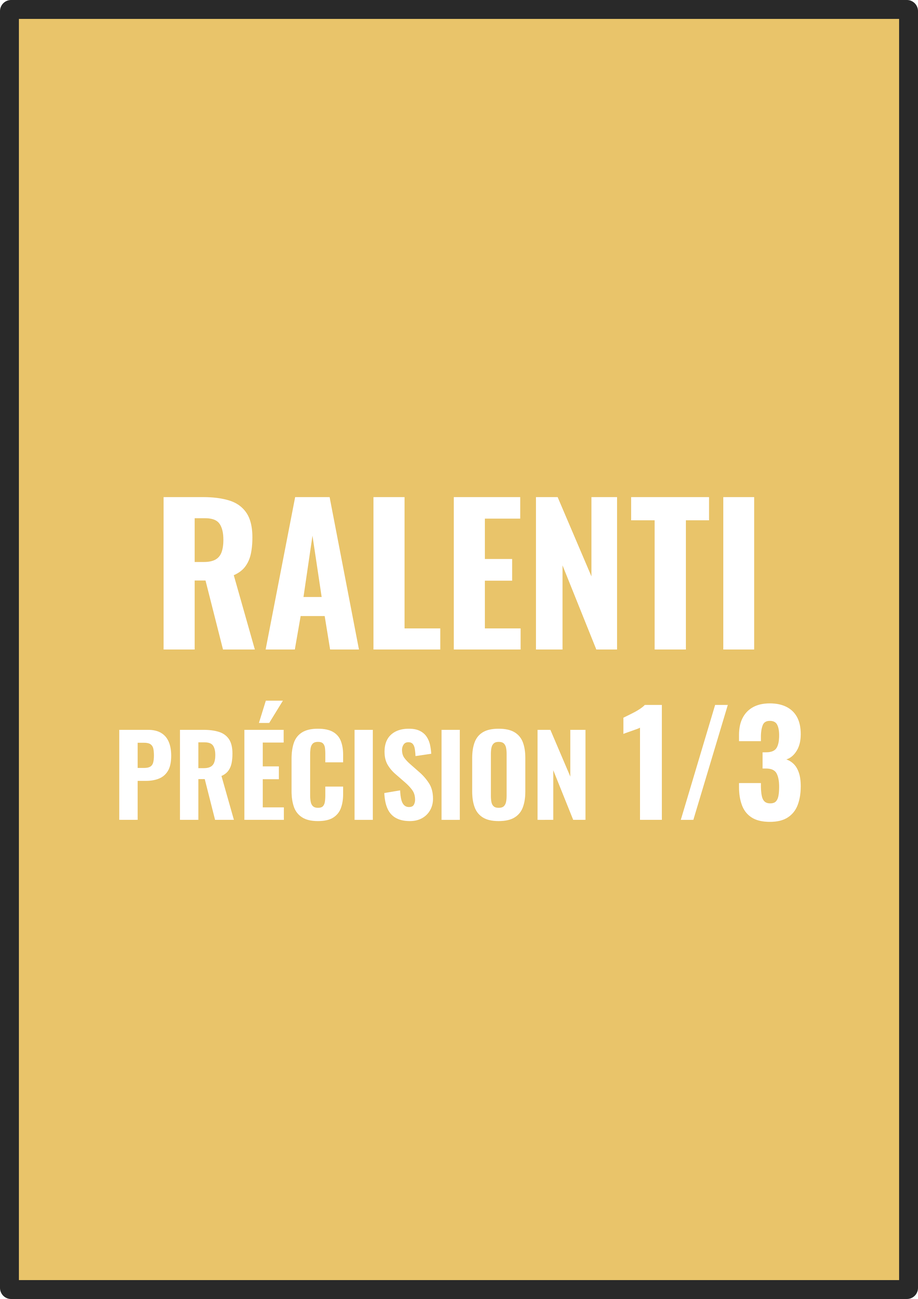
<style>
.page{position:relative;width:918px;height:1299px;background:#e9c46a}
.page>*{position:absolute;margin:0}
.t1{font:111.1px "Oswald-SemiBold";color:#ffffff}
.t2{font:188.2px "Oswald-SemiBold";color:#ffffff}
.t3{font:141.9px "Oswald-SemiBold";color:#ffffff}
</style>
<div class="page">
<p class="t1" style="left:119px;top:497px;width:682px;height:325px;text-align:center"><span class="t2">RALENTI<br></span>PRÉCISION <span class="t3">1/3</span></p>
</div>
